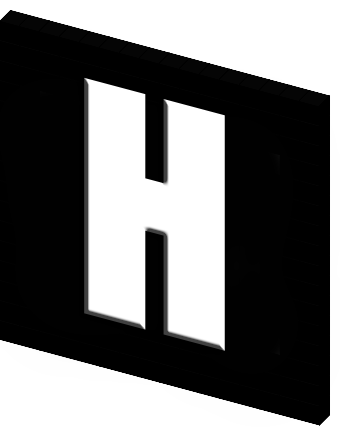
<style>
.page{position:relative;width:340px;height:431px;background:#ffffff}
.page>*{position:absolute;margin:0}
.t1{font:297.8px "Impact";color:#ffffff;scale:1.03 1}
</style>
<div class="page">
<p class="t1" style="left:84px;top:77px;width:141px;height:274px;rotate:15deg">H</p>
</div>
